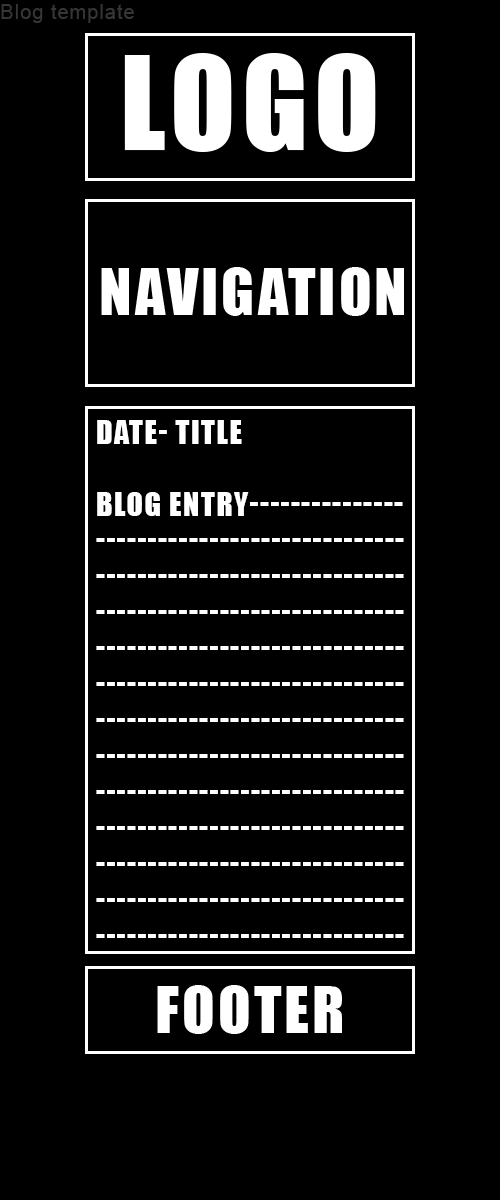
<style>
.page{position:relative;width:500px;height:1200px;background:#000000}
.page>*{position:absolute;margin:0}
.t1{font:20px "ArialMT";letter-spacing:0.05em;color:#363636}
.t2{font:30px "Impact";letter-spacing:0.05em;color:#ffffff;text-transform:uppercase}
</style>
<div class="page">
<p class="t1" style="left:1px;top:4px;width:133px;height:19px">Blog template</p>
<p class="t2" style="left:96px;top:420px;width:308px;height:518px">Date- Title<br><br>Blog entry---------------<br>------------------------------<br>------------------------------<br>------------------------------<br>------------------------------<br>------------------------------<br>------------------------------<br>------------------------------<br>------------------------------<br>------------------------------<br>------------------------------<br>------------------------------<br>------------------------------</p>
</div>
